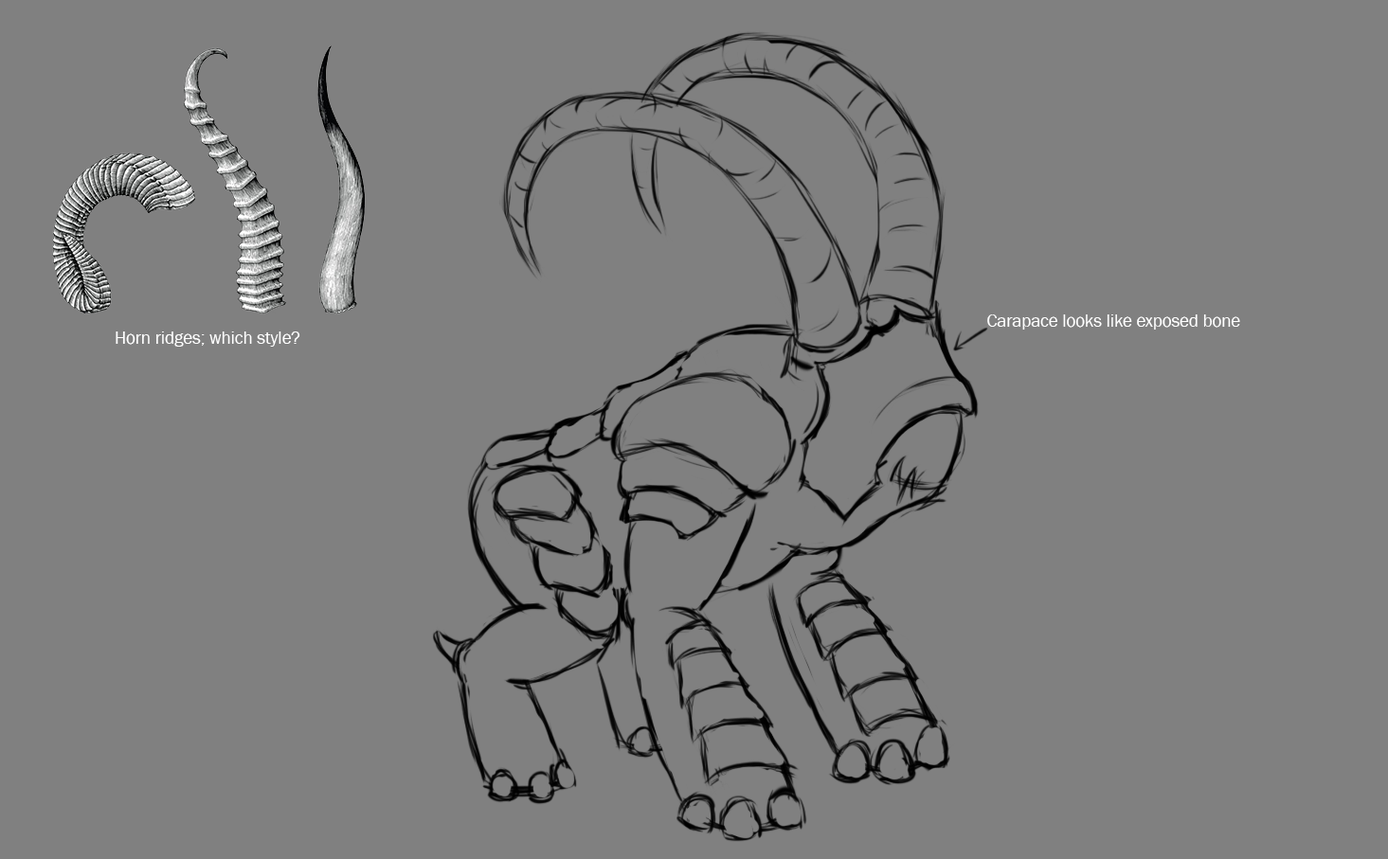
<style>
.page{position:relative;width:1388px;height:859px;background:#808080}
.page>*{position:absolute;margin:0}
.t1{font:17.7px "FranklinGothic-Book";color:#ffffff}
</style>
<div class="page">
<p class="t1" style="left:987px;top:315px;width:253px;height:15px">Carapace looks like exposed bone</p>
<p class="t1" style="left:116px;top:332px;width:184px;height:15px">Horn ridges; which style?</p>
</div>
